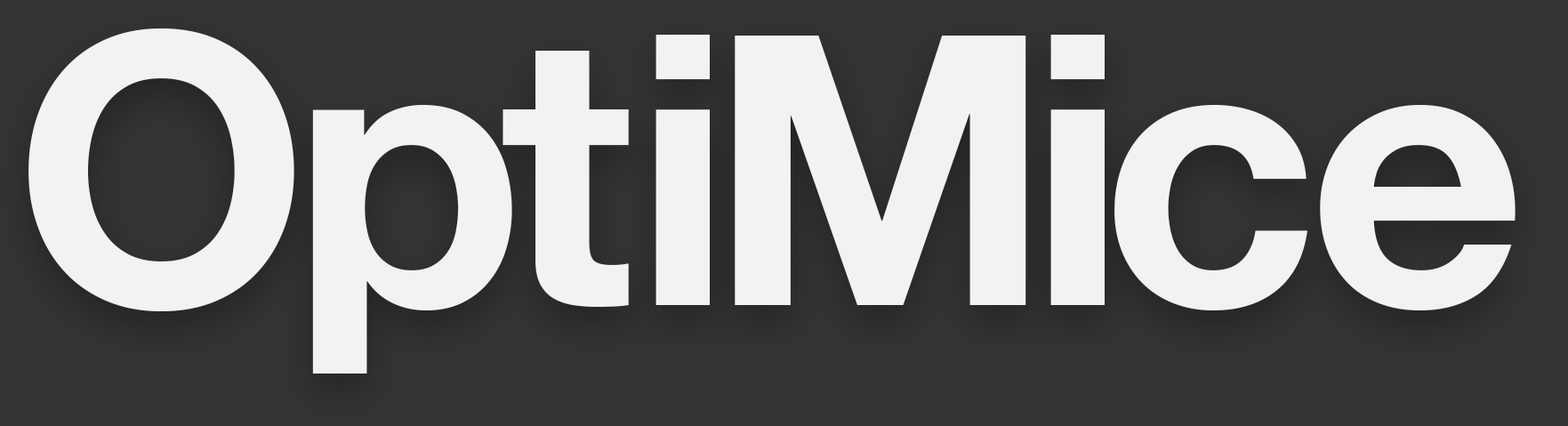
<style>
.page{position:relative;width:1568px;height:426px;background:#333333}
.page>*{position:absolute;margin:0}
.t1{font:377.9px "HelveticaNeue-Bold";color:#f2f2f2}
</style>
<div class="page">
<p class="t1" style="left:28px;top:28px;width:1488px;height:346px">OptiMice</p>
</div>
